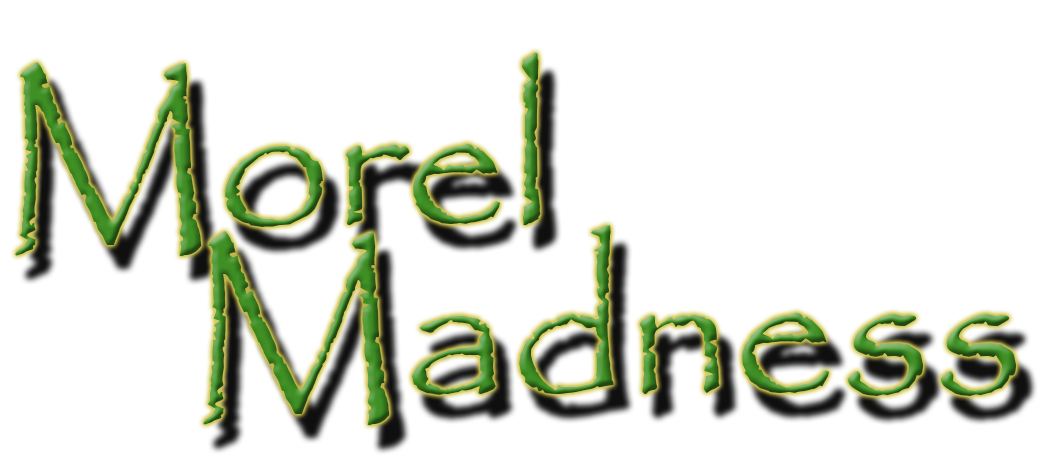
<style>
.page{position:relative;width:1051px;height:456px;background:#ffffff}
.page>*{position:absolute;margin:0}
.t1{font:208.3px "Papyrus-Regular"}
</style>
<div class="page">
<p class="t1" style="left:15px;top:52px;width:526px;height:205px">Morel</p>
<p class="t1" style="left:203px;top:225px;width:814px;height:201px">Madness</p>
</div>
